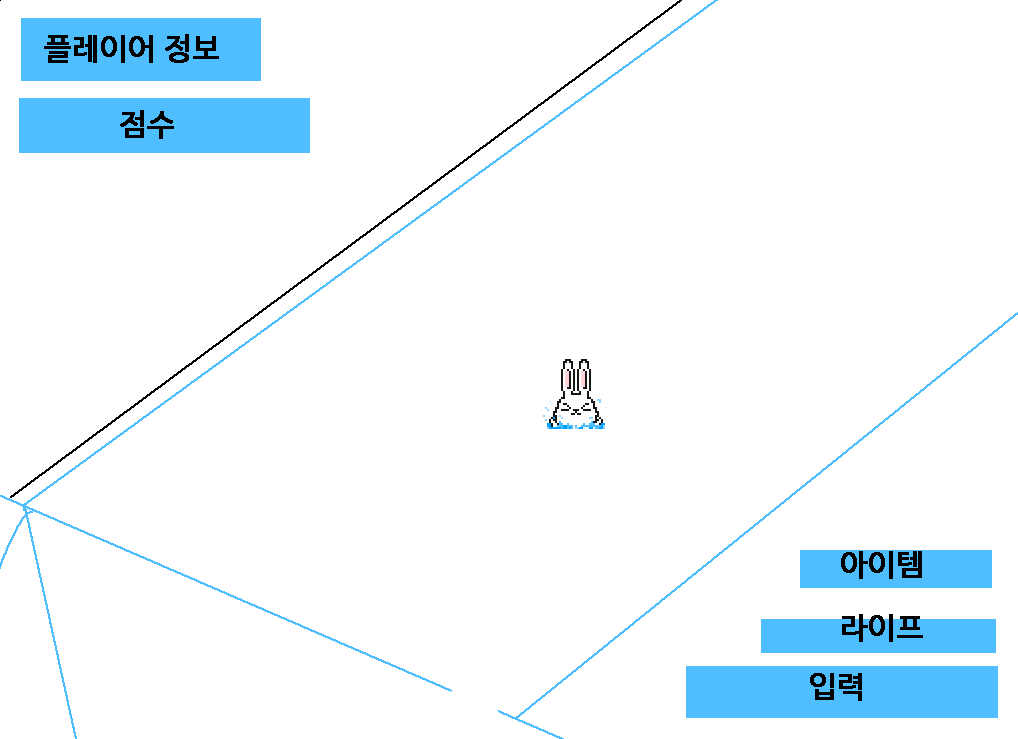
<style>
.page{position:relative;width:1018px;height:739px;background:#ffffff}
.page>*{position:absolute;margin:0}
.t1{font:30px "NanumBarunGothic";color:#000000;font-weight:bold}
</style>
<div class="page">
<p class="t1" style="left:44px;top:34px;width:175px;height:29px">플레이어 정보</p>
<p class="t1" style="left:120px;top:110px;width:54px;height:29px">점수</p>
<p class="t1" style="left:841px;top:551px;width:81px;height:28px">아이템</p>
<p class="t1" style="left:842px;top:614px;width:81px;height:28px">라이프</p>
<p class="t1" style="left:810px;top:673px;width:52px;height:28px">입력</p>
</div>
